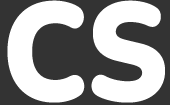
<style>
.page{position:relative;width:170px;height:105px;background:#333333}
.page>*{position:absolute;margin:0}
.t1{font:140px "Nunito-Black";color:#ffffff;scale:0.9 1}
</style>
<div class="page">
<p class="t1" style="left:7px;top:0px;width:158px;height:103px">CS</p>
</div>
